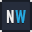
<style>
.page{position:relative;width:32px;height:32px;background:#262d3c}
.page>*{position:absolute;margin:0}
.t1{font:18px "DINCondensed-Bold";letter-spacing:0.05em;color:#eeeded}
.t2{font:18px "DINCondensed-Bold";letter-spacing:0.05em;color:#27a9e1}
</style>
<div class="page">
<p class="t1" style="left:6px;top:10px;width:20px;height:13px">N<span class="t2">W</span></p>
</div>
